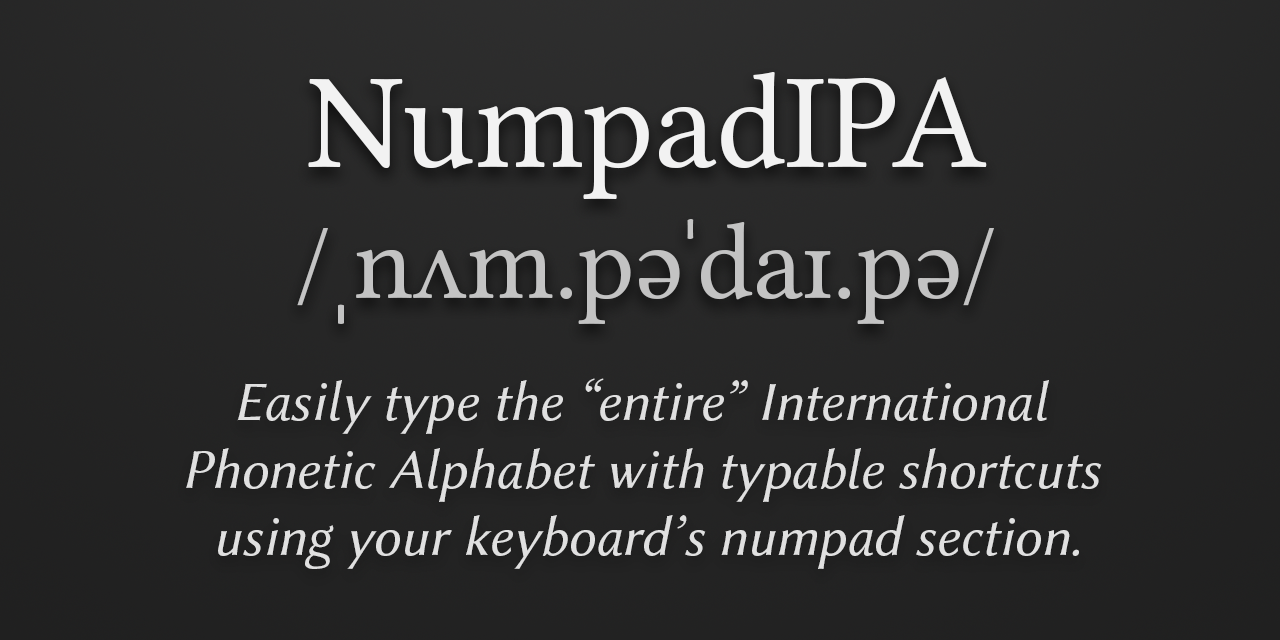
<style>
.page{position:relative;width:1280px;height:640px}
.page>*{position:absolute;margin:0}
.t1{font:109.3px "LibertinusSerif-Regular";color:#c3c3c3}
.t2{font:136.6px "LibertinusSerif-Regular";color:#f2f2f2}
.t3{font:56.2px "LibertinusSans-Italic";color:#e0e0e0}
</style>
<div class="page">
<p class="t1" style="left:297px;top:72px;width:697px;height:252px;text-align:center"><span class="t2">NumpadIPA<br></span>/ˌnʌm.pəˈdaɪ.pə/</p>
<p class="t3" style="left:186px;top:378px;width:916px;height:191px;text-align:center">Easily type the “entire” International <br>Phonetic Alphabet with typable shortcuts <br>using your keyboard’s numpad section.</p>
</div>
